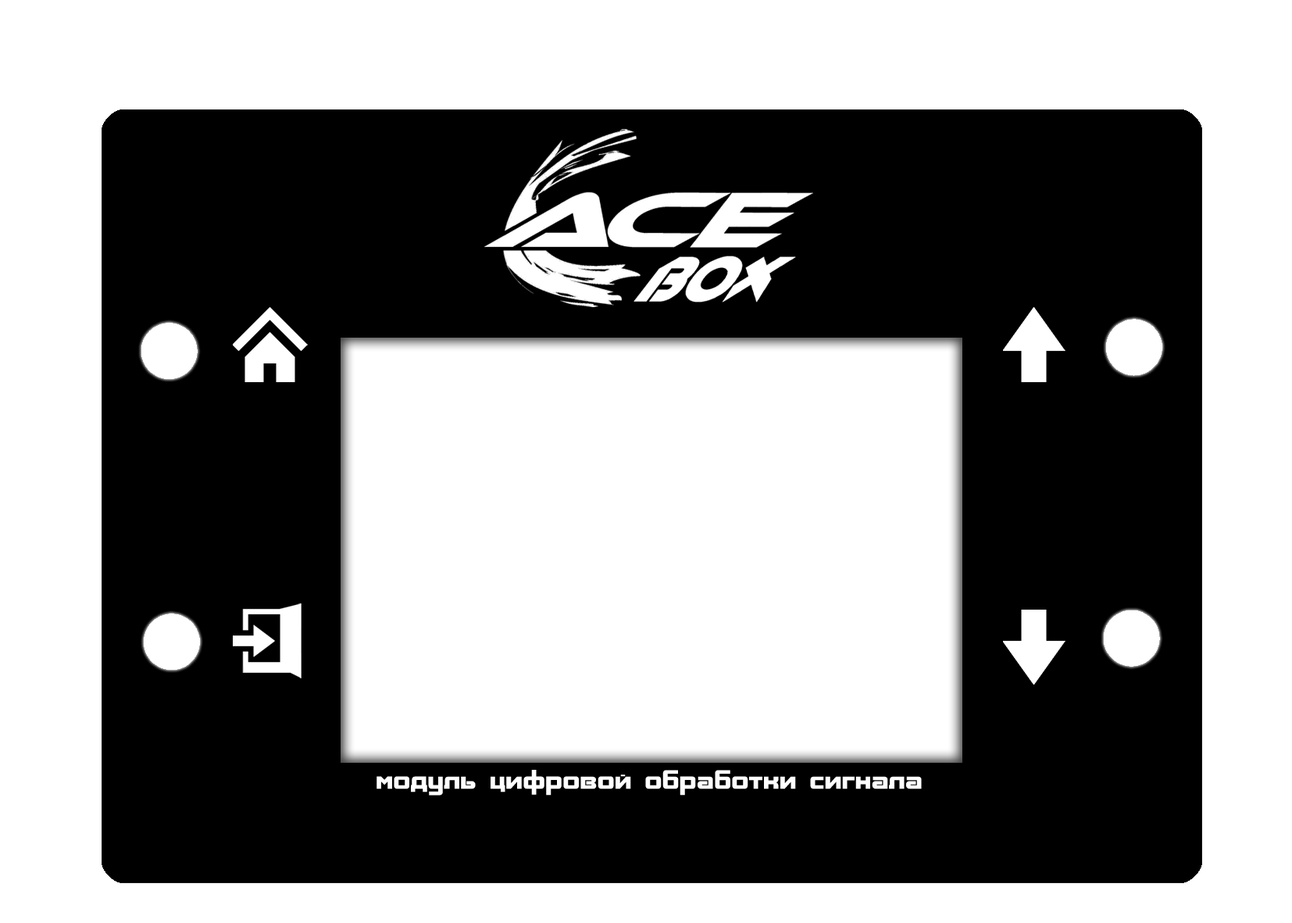
<style>
.page{position:relative;width:1292px;height:923px;background:#ffffff}
.page>*{position:absolute;margin:0}
.t1{font:26px "Aksent";letter-spacing:0.01em;color:#ffffff}
</style>
<div class="page">
<p class="t1" style="left:377px;top:770px;width:545px;height:25px">модуль цифровой обработки сигнала</p>
</div>
